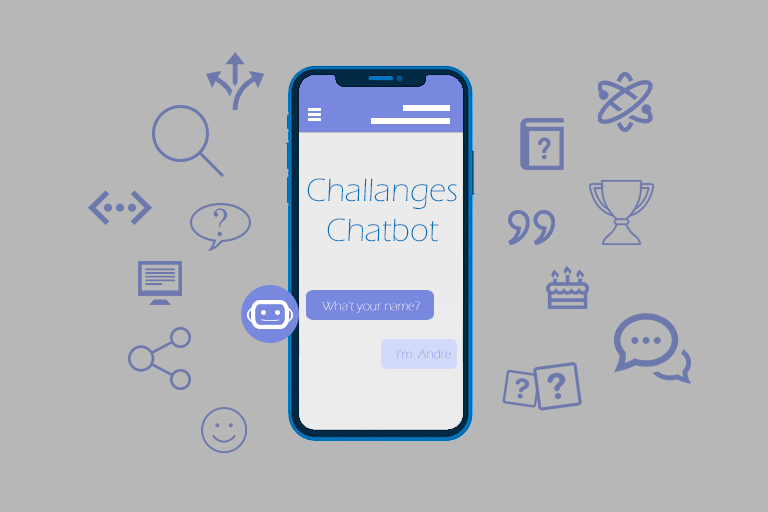
<style>
.page{position:relative;width:768px;height:512px;background:#b7b7b7}
.page>*{position:absolute;margin:0}
.t1{font:33.3px "ErasITC-Light";color:#0072bc}
.t2{font:12.5px "ErasITC-Light"}
</style>
<div class="page">
<p class="t1" style="left:307px;top:178px;width:150px;height:64px;text-align:center">Challanges<br>Chatbot</p>
<p class="t2" style="left:322px;top:301px;width:98px;height:12px">Wha’t your name?</p>
<p class="t2" style="left:397px;top:349px;width:54px;height:10px">I’m  Andre</p>
</div>
